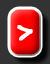
<style>
.page{position:relative;width:50px;height:64px;background:#333333}
.page>*{position:absolute;margin:0}
.t1{font:36.8px "SegoeMarker";color:#ffffff;font-weight:bold}
</style>
<div class="page">
<p class="t1" style="left:17px;top:25px;width:16px;height:16px">&gt;</p>
</div>
